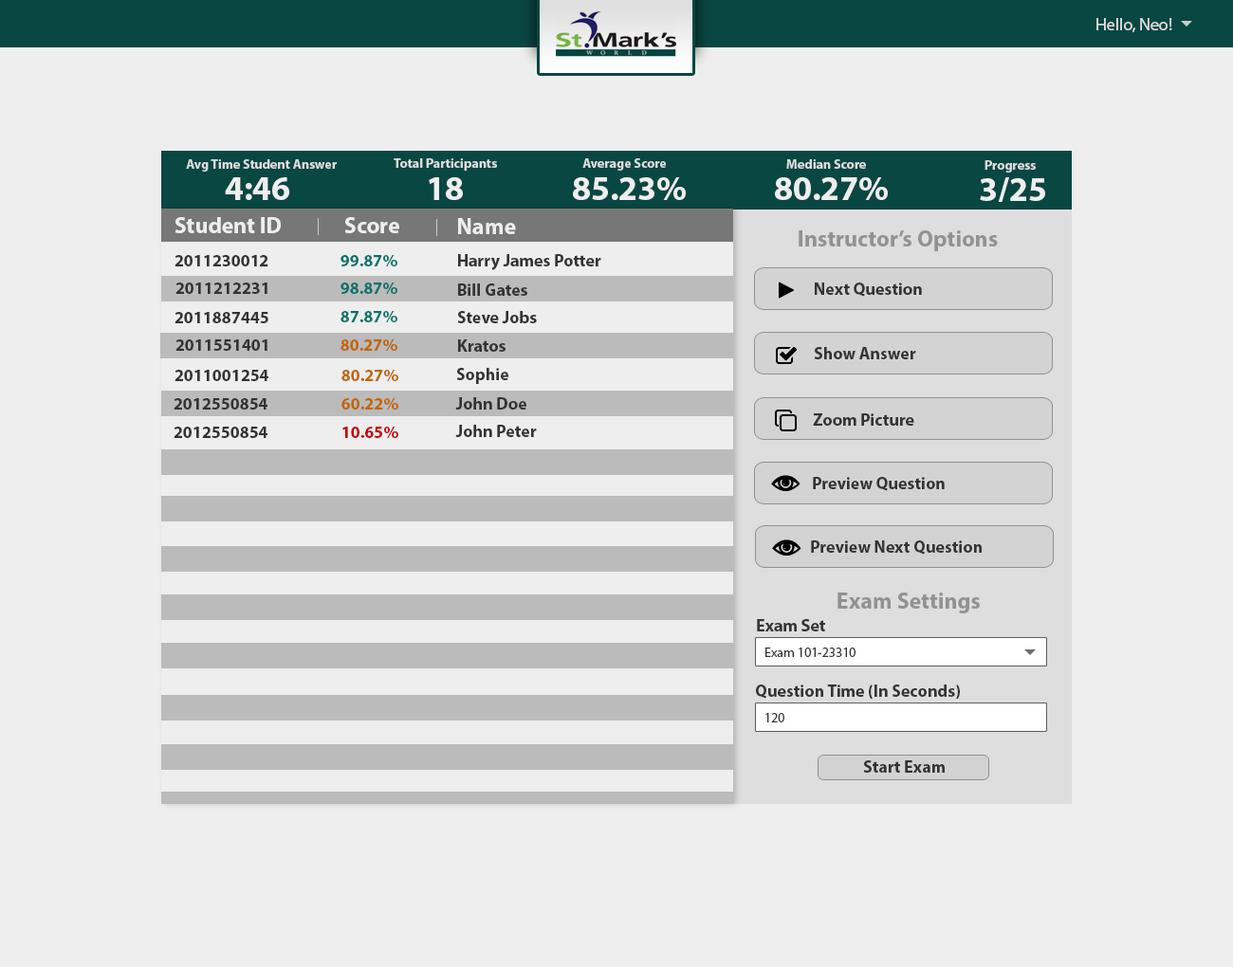
<style>
.page{position:relative;width:1233px;height:967px;background:#eeeeee}
.page>*{position:absolute;margin:0}
.t1{font:17.1px "MyriadPro-Regular";color:#dddddd}
.t2{font:13.3px "MyriadPro-Bold";color:#dddddd}
.t3{font:34.1px "MyriadPro-Bold";color:#eeeeee}
.t4{font:22.8px "MyriadPro-Bold";color:#eeeeee}
.t5{font:22.8px "MyriadPro-Bold";color:#929292}
.t6{font:17.1px "MyriadPro-Bold";color:#333333}
.t7{font:17.1px "MyriadPro-Bold";color:#05746b}
.t8{font:17.1px "MyriadPro-Bold";color:#c16605}
.t9{font:17.1px "MyriadPro-Bold";color:#c60202}
.t10{font:13.3px "MyriadPro-Regular";color:#333333}
</style>
<div class="page">
<p class="t1" style="left:1096px;top:18px;width:76px;height:14px">Hello, Neo!</p>
<p class="t2" style="left:186px;top:159px;width:151px;height:13px">Avg Time Student Answer</p>
<p class="t2" style="left:394px;top:158px;width:103px;height:13px">Total Participants</p>
<p class="t2" style="left:582px;top:158px;width:84px;height:13px">Average Score</p>
<p class="t2" style="left:786px;top:159px;width:80px;height:10px">Median Score</p>
<p class="t2" style="left:984px;top:160px;width:52px;height:13px">Progress</p>
<p class="t3" style="left:225px;top:177px;width:64px;height:23px">4:46</p>
<p class="t3" style="left:429px;top:177px;width:34px;height:23px">18</p>
<p class="t3" style="left:573px;top:177px;width:113px;height:23px">85.23%</p>
<p class="t3" style="left:775px;top:177px;width:113px;height:23px">80.27%</p>
<p class="t3" style="left:980px;top:177px;width:65px;height:25px">3/25</p>
<p class="t4" style="left:174px;top:217px;width:107px;height:16px">Student ID</p>
<p class="t4" style="left:344px;top:217px;width:55px;height:16px">Score</p>
<p class="t4" style="left:458px;top:218px;width:58px;height:16px">Name</p>
<p class="t5" style="left:798px;top:230px;width:200px;height:21px">Instructor’s Options</p>
<p class="t6" style="left:174px;top:255px;width:94px;height:11px">2011230012</p>
<p class="t7" style="left:340px;top:255px;width:57px;height:12px">99.87%</p>
<p class="t6" style="left:458px;top:254px;width:143px;height:16px">Harry James Potter</p>
<p class="t6" style="left:175px;top:283px;width:92px;height:11px">2011212231</p>
<p class="t7" style="left:340px;top:283px;width:57px;height:12px">98.87%</p>
<p class="t6" style="left:458px;top:284px;width:69px;height:12px">Bill Gates</p>
<p class="t6" style="left:815px;top:283px;width:107px;height:14px">Next Question</p>
<p class="t6" style="left:174px;top:312px;width:94px;height:11px">2011887445</p>
<p class="t7" style="left:340px;top:311px;width:57px;height:12px">87.87%</p>
<p class="t6" style="left:457px;top:311px;width:80px;height:12px">Steve Jobs</p>
<p class="t6" style="left:175px;top:339px;width:92px;height:12px">2011551401</p>
<p class="t8" style="left:340px;top:339px;width:57px;height:13px">80.27%</p>
<p class="t6" style="left:458px;top:339px;width:47px;height:13px">Kratos</p>
<p class="t6" style="left:814px;top:347px;width:102px;height:12px">Show Answer</p>
<p class="t6" style="left:174px;top:370px;width:94px;height:11px">2011001254</p>
<p class="t8" style="left:341px;top:370px;width:57px;height:12px">80.27%</p>
<p class="t6" style="left:456px;top:368px;width:52px;height:16px">Sophie</p>
<p class="t6" style="left:174px;top:398px;width:93px;height:12px">2012550854</p>
<p class="t8" style="left:341px;top:398px;width:57px;height:13px">60.22%</p>
<p class="t6" style="left:455px;top:397px;width:71px;height:13px">John Doe</p>
<p class="t6" style="left:813px;top:413px;width:101px;height:13px">Zoom Picture</p>
<p class="t6" style="left:455px;top:425px;width:82px;height:12px">John Peter</p>
<p class="t6" style="left:174px;top:427px;width:93px;height:11px">2012550854</p>
<p class="t9" style="left:342px;top:427px;width:56px;height:12px">10.65%</p>
<p class="t6" style="left:813px;top:477px;width:132px;height:14px">Preview Question</p>
<p class="t6" style="left:811px;top:541px;width:170px;height:14px">Preview Next Question</p>
<p class="t5" style="left:837px;top:593px;width:143px;height:21px">Exam Settings</p>
<p class="t6" style="left:757px;top:619px;width:68px;height:13px">Exam Set</p>
<p class="t10" style="left:765px;top:648px;width:90px;height:9px">Exam 101-23310</p>
<p class="t6" style="left:756px;top:685px;width:204px;height:14px">Question Time (In Seconds)</p>
<p class="t10" style="left:765px;top:713px;width:19px;height:10px">120</p>
<p class="t6" style="left:863px;top:761px;width:82px;height:12px">Start Exam</p>
</div>
